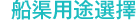
<style>
.page{position:relative;width:136px;height:21px;background:#ffffff}
.page>*{position:absolute;margin:0}
.t1{font:21px "GothicMB101Pro-Medium";color:#1dbcc0}
</style>
<div class="page">
<p class="t1" style="left:11px;top:0px;width:125px;height:20px">船渠用途選擇</p>
</div>
